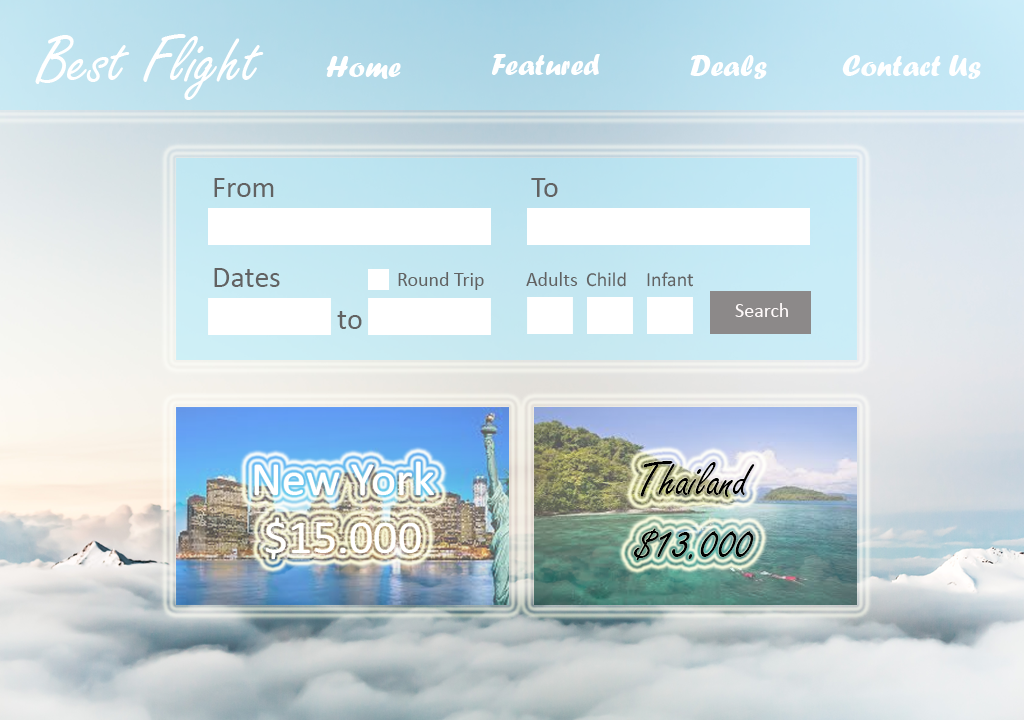
<style>
.page{position:relative;width:1024px;height:720px}
.page>*{position:absolute;margin:0}
.t1{font:72px "FreestyleScript-Regular";color:#ffffff}
.t2{font:30px "ForteMT";color:#ffffff}
.t3{font:30px "Calibri";color:#626262}
.t4{font:20px "Calibri";color:#626262}
.t5{font:20px "Calibri";color:#fffafa}
.t6{font:48px "Calibri";color:#ffffff}
.t7{font:51.7px "FreestyleScript-Regular";color:#000000}
</style>
<div class="page">
<p class="t1" style="left:35px;top:34px;width:229px;height:66px">Best Flight</p>
<p class="t2" style="left:491px;top:54px;width:109px;height:21px">Featured</p>
<p class="t2" style="left:326px;top:56px;width:75px;height:23px">Home</p>
<p class="t2" style="left:690px;top:55px;width:77px;height:24px">Deals</p>
<p class="t2" style="left:842px;top:55px;width:139px;height:24px">Contact Us</p>
<p class="t3" style="left:214px;top:178px;width:60px;height:19px">From</p>
<p class="t3" style="left:531px;top:178px;width:27px;height:19px">To</p>
<p class="t3" style="left:214px;top:268px;width:66px;height:19px">Dates</p>
<p class="t4" style="left:398px;top:272px;width:86px;height:18px">Round Trip</p>
<p class="t4" style="left:526px;top:272px;width:52px;height:14px">Adults</p>
<p class="t4" style="left:586px;top:272px;width:40px;height:15px">Child</p>
<p class="t4" style="left:647px;top:272px;width:47px;height:15px">Infant</p>
<p class="t5" style="left:735px;top:303px;width:53px;height:14px">Search</p>
<p class="t3" style="left:337px;top:311px;width:25px;height:18px">to</p>
<p class="t6" style="left:255px;top:462px;width:179px;height:97px;text-align:center">New York<br>$15.000</p>
<p class="t7" style="left:633px;top:461px;width:122px;height:100px">Thailand<br>$13.000</p>
</div>
